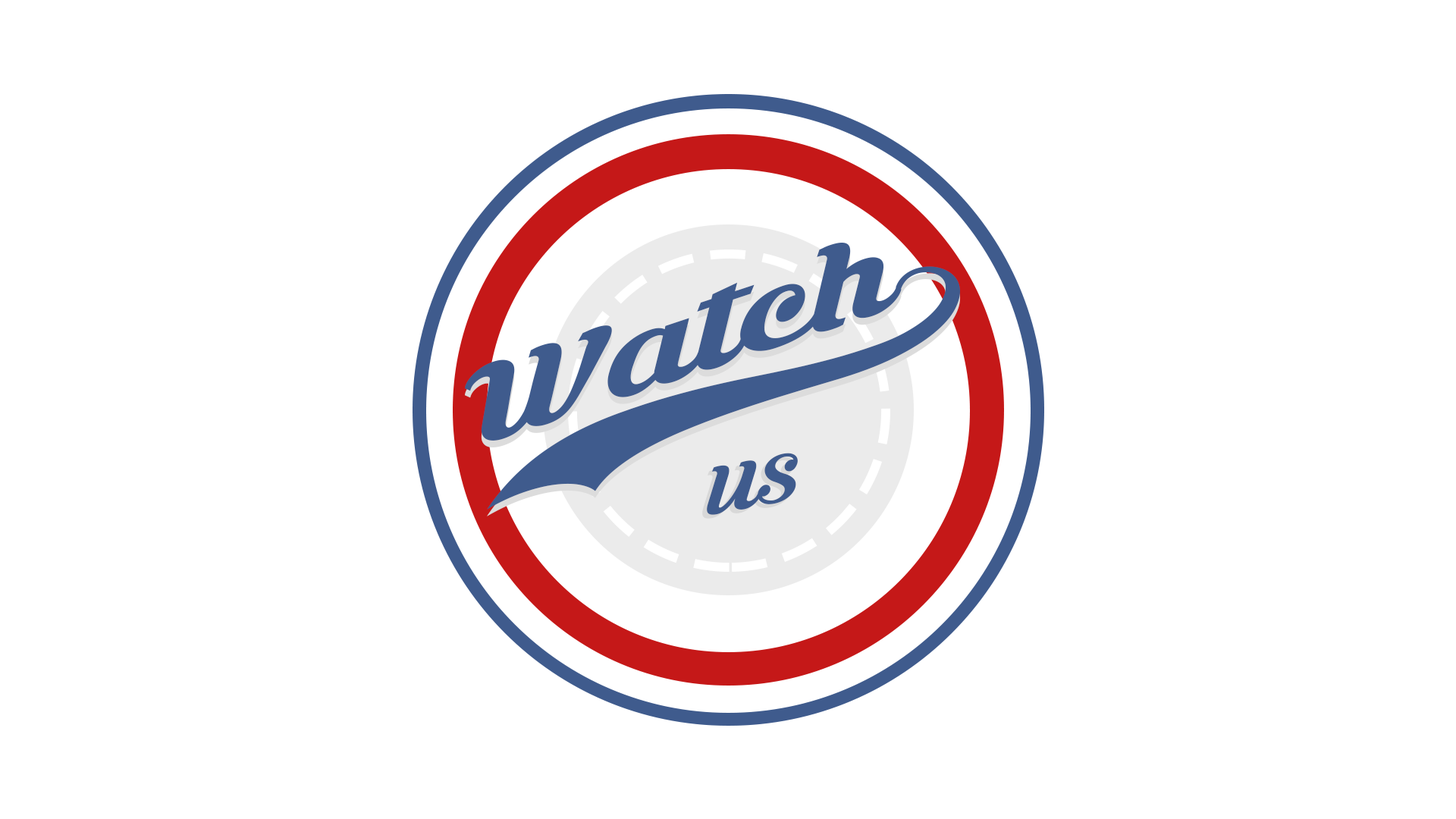
<style>
.page{position:relative;width:1456px;height:819px;background:#ffffff}
.page>*{position:absolute;margin:0}
.t1{font:142.9px "KrinkesRegularPERSONALUSE";color:#3f5b8d;scale:1.57 1}
.t2{font:88.1px "KrinkesRegularPERSONALUSE";scale:1.28 1}
.t3{font:88.1px "KrinkesRegularPERSONALUSE";color:#3f5b8d;scale:1.28 1}
</style>
<div class="page">
<p class="t1" style="left:464px;top:243px;width:496px;height:267px;rotate:-18deg">Watch7</p>
<p class="t1" style="left:464px;top:249px;width:496px;height:267px;rotate:-18deg">Watch7</p>
<p class="t2" style="left:702px;top:457px;width:92px;height:62px;rotate:-10deg">US</p>
<p class="t3" style="left:707px;top:453px;width:91px;height:62px;rotate:-10deg">US</p>
</div>
